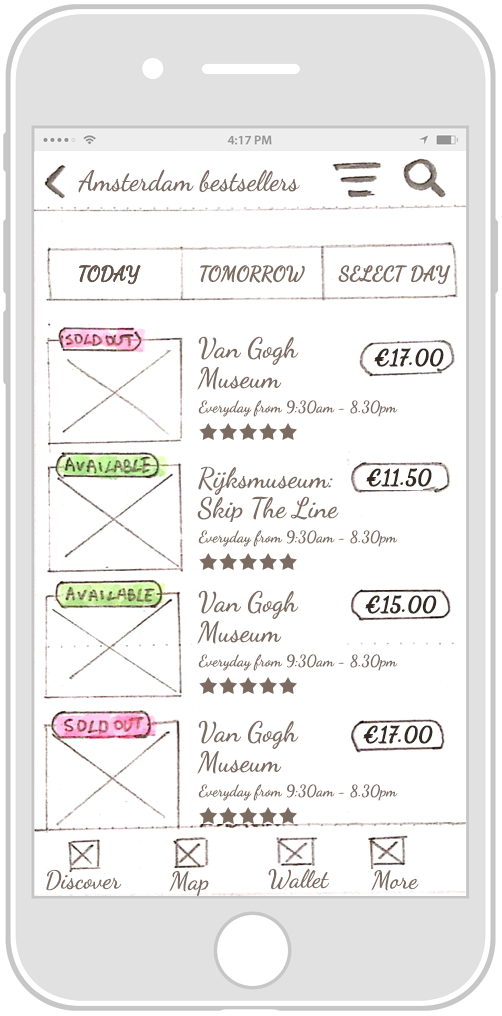
<style>
.page{position:relative;width:502px;height:1016px;background:#ffffff}
.page>*{position:absolute;margin:0}
.t1{font:28px "DancingScript-Regular";color:#7c6b61}
.t2{font:20px "DancingScript-Regular";color:#625248;font-weight:bold}
.t3{font:20px "DancingScript-Regular";color:#7c6b61;font-weight:bold}
.t4{font:28px/30px "DancingScript-Regular";color:#7c6b61}
.t5{font:21.6px "DancingScript-Bold";color:#342a21;font-weight:bold}
.t6{font:16px "DancingScript-Regular";color:#7c6b61}
.t7{font:25px "DancingScript-Regular";color:#7c6b61}
</style>
<div class="page">
<p class="t1" style="left:78px;top:169px;width:222px;height:24px">Amsterdam bestsellers</p>
<p class="t2" style="left:79px;top:265px;width:62px;height:20px">TODAY</p>
<p class="t2" style="left:79px;top:265px;width:62px;height:20px">TODAY</p>
<p class="t3" style="left:200px;top:265px;width:105px;height:18px">TOMORROW</p>
<p class="t3" style="left:338px;top:265px;width:113px;height:20px">SELECT DAY</p>
<p class="t4" style="left:197px;top:336px;width:102px;height:54px">Van Gogh <br>Museum</p>
<p class="t5" style="left:374px;top:348px;width:70px;height:19px">€17.00</p>
<p class="t6" style="left:198px;top:400px;width:200px;height:17px">Everyday from 9:30am - 8.30pm</p>
<p class="t4" style="left:197px;top:466px;width:142px;height:59px">Rijksmuseum: <br>Skip The Line</p>
<p class="t5" style="left:366px;top:468px;width:66px;height:19px">€11.50</p>
<p class="t6" style="left:198px;top:530px;width:200px;height:17px">Everyday from 9:30am - 8.30pm</p>
<p class="t4" style="left:197px;top:590px;width:102px;height:54px">Van Gogh <br>Museum</p>
<p class="t5" style="left:365px;top:595px;width:72px;height:19px">€15.00</p>
<p class="t6" style="left:198px;top:654px;width:200px;height:17px">Everyday from 9:30am - 8.30pm</p>
<p class="t4" style="left:197px;top:720px;width:102px;height:54px">Van Gogh <br>Museum</p>
<p class="t5" style="left:363px;top:725px;width:70px;height:19px">€17.00</p>
<p class="t6" style="left:198px;top:784px;width:200px;height:17px">Everyday from 9:30am - 8.30pm</p>
<p class="t7" style="left:46px;top:869px;width:76px;height:22px">Discover</p>
<p class="t7" style="left:169px;top:870px;width:40px;height:27px">Map</p>
<p class="t7" style="left:268px;top:868px;width:61px;height:22px">Wallet</p>
<p class="t7" style="left:371px;top:869px;width:48px;height:22px">More</p>
</div>
